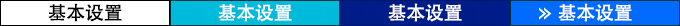
<style>
.page{position:relative;width:680px;height:26px;background:#ffffff}
.page>*{position:absolute;margin:0}
.t1{font:18.7px "AdobeHeitiStd-Regular";color:#000000}
.t2{font:18.7px "AdobeHeitiStd-Regular";color:#ffffff}
</style>
<div class="page">
<p class="t1" style="left:48px;top:3px;width:74px;height:19px">基本设置</p>
<p class="t2" style="left:218px;top:3px;width:74px;height:19px">基本设置</p>
<p class="t2" style="left:388px;top:3px;width:74px;height:19px">基本设置</p>
<p class="t2" style="left:558px;top:3px;width:74px;height:19px">基本设置</p>
</div>
